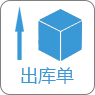
<style>
.page{position:relative;width:95px;height:95px;background:#ffffff}
.page>*{position:absolute;margin:0}
.t1{font:18px "MicrosoftYaHei";color:#3998d6}
</style>
<div class="page">
<p class="t1" style="left:21px;top:67px;width:53px;height:17px">出库单</p>
</div>
